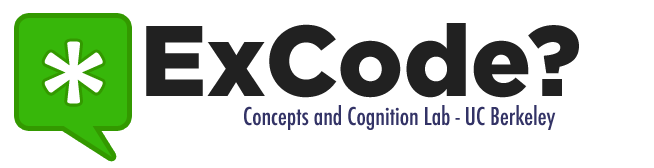
<style>
.page{position:relative;width:654px;height:168px;background:#ffffff}
.page>*{position:absolute;margin:0}
.t1{font:100px "GothamHTF-Black";color:#212121}
.t2{font:170px "Calibri";color:#ffffff}
.t3{font:24px "Futura-CondensedMedium";color:#333366}
</style>
<div class="page">
<p class="t1" style="left:146px;top:23px;width:433px;height:75px">ExCode?</p>
<p class="t2" style="left:44px;top:41px;width:59px;height:63px">*</p>
<p class="t3" style="left:244px;top:105px;width:312px;height:25px">Concepts and Cognition Lab - UC Berkeley</p>
</div>
